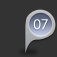
<style>
.page{position:relative;width:57px;height:57px;background:#333333}
.page>*{position:absolute;margin:0}
.t1{font:15px "MyriadPro-Regular";color:#ffffff}
</style>
<div class="page">
<p class="t1" style="left:33px;top:19px;width:15px;height:11px">07</p>
</div>
